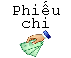
<style>
.page{position:relative;width:71px;height:58px;background:#ffffff}
.page>*{position:absolute;margin:0}
.t1{font:16px/13.3px "CourierNewPSMT";color:#000000}
</style>
<div class="page">
<p class="t1" style="left:13px;top:1px;width:47px;height:27px;text-align:center">Phiếu<br>chi</p>
</div>
